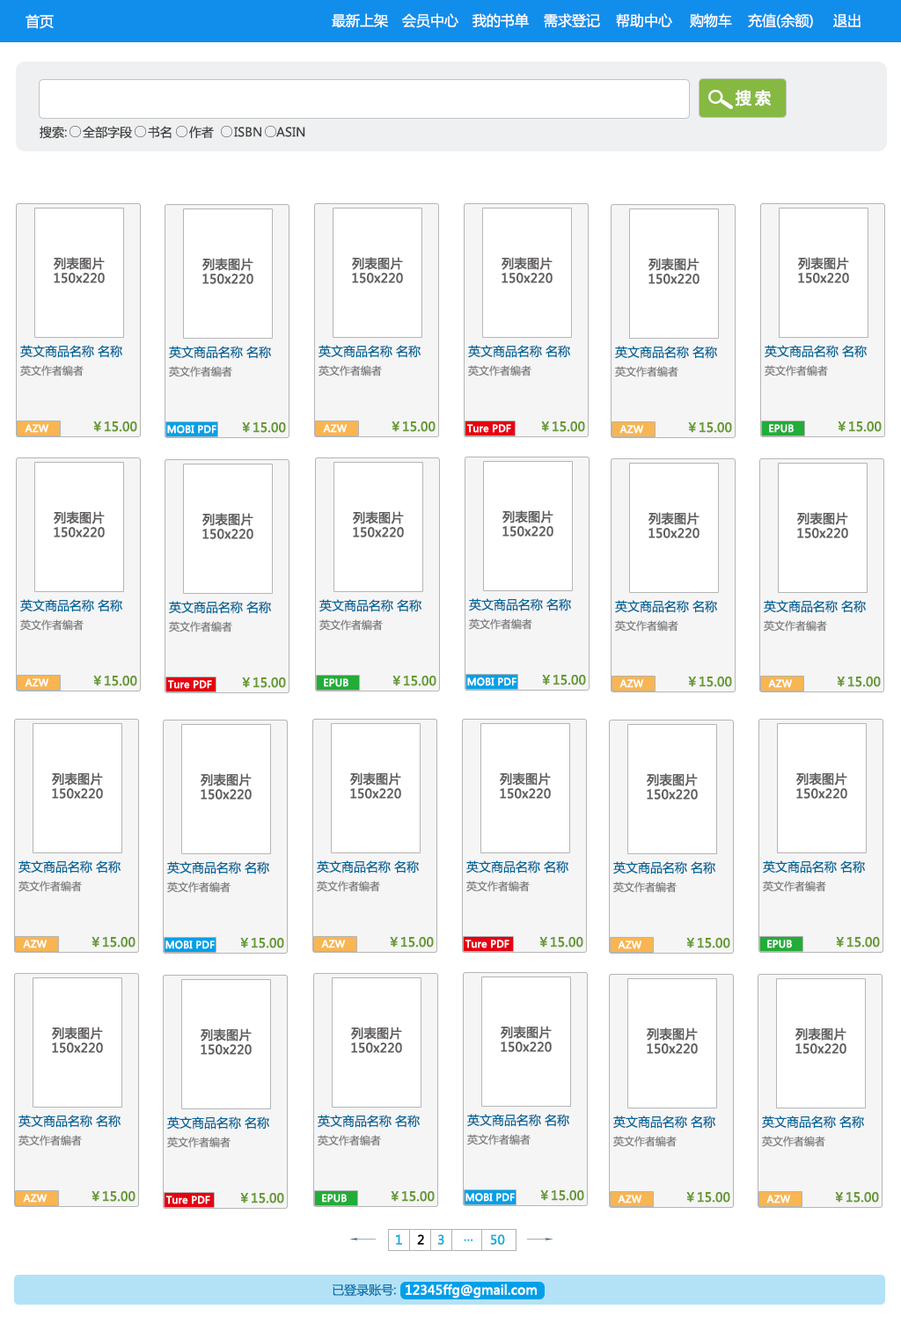
<style>
.page{position:relative;width:901px;height:1324px;background:#ffffff}
.page>*{position:absolute;margin:0}
.t1{font:14.1px "MicrosoftYaHei";color:#ffffff}
.t2{font:15.8px "MicrosoftYaHei";letter-spacing:0.2em;color:#ffffff;font-weight:bold}
.t3{font:12.3px "MicrosoftYaHei";color:#414040}
.t4{font:12.3px "MicrosoftYaHei";color:#615e5e;font-weight:bold}
.t5{font:12.3px "MicrosoftYaHei";color:#006699}
.t6{font:10.6px "MicrosoftYaHei";color:#7e7e7e}
.t7{font:9.7px "MicrosoftYaHei";color:#ffffff;font-weight:bold}
.t8{font:12.3px "MicrosoftYaHei";color:#669933;font-weight:bold}
.t9{font:12.3px "MicrosoftYaHei";color:#19b0dc;font-weight:bold}
.t10{font:12.3px "MicrosoftYaHei";color:#000000;font-weight:bold}
.t11{font:12.3px "MicrosoftYaHei";color:#0875ae}
.t12{font:12.3px "MicrosoftYaHei";color:#ffffff;font-weight:bold}
</style>
<div class="page">
<p class="t1" style="left:26px;top:14px;width:28px;height:15px">首页</p>
<p class="t1" style="left:332px;top:13px;width:56px;height:15px">最新上架</p>
<p class="t1" style="left:402px;top:13px;width:56px;height:15px">会员中心</p>
<p class="t1" style="left:472px;top:13px;width:57px;height:15px">我的书单</p>
<p class="t1" style="left:544px;top:13px;width:56px;height:15px">需求登记</p>
<p class="t1" style="left:616px;top:13px;width:56px;height:15px">帮助中心</p>
<p class="t1" style="left:690px;top:13px;width:42px;height:15px">购物车</p>
<p class="t1" style="left:748px;top:13px;width:65px;height:15px">充值(余额)</p>
<p class="t1" style="left:833px;top:13px;width:27px;height:14px">退出</p>
<p class="t2" style="left:734px;top:90px;width:37px;height:16px">搜索</p>
<p class="t3" style="left:40px;top:126px;width:27px;height:13px">搜索:</p>
<p class="t3" style="left:83px;top:126px;width:49px;height:13px">全部字段</p>
<p class="t3" style="left:148px;top:126px;width:24px;height:13px">书名</p>
<p class="t3" style="left:189px;top:126px;width:25px;height:12px">作者</p>
<p class="t3" style="left:234px;top:127px;width:27px;height:10px">ISBN</p>
<p class="t3" style="left:276px;top:127px;width:29px;height:10px">ASIN</p>
<p class="t4" style="left:54px;top:257px;width:51px;height:26px;text-align:center">列表图片<br>150x220</p>
<p class="t4" style="left:202px;top:258px;width:51px;height:26px;text-align:center">列表图片<br>150x220</p>
<p class="t4" style="left:352px;top:257px;width:51px;height:26px;text-align:center">列表图片<br>150x220</p>
<p class="t4" style="left:501px;top:257px;width:51px;height:26px;text-align:center">列表图片<br>150x220</p>
<p class="t4" style="left:648px;top:258px;width:51px;height:26px;text-align:center">列表图片<br>150x220</p>
<p class="t4" style="left:798px;top:257px;width:51px;height:26px;text-align:center">列表图片<br>150x220</p>
<p class="t5" style="left:20px;top:345px;width:102px;height:13px">英文商品名称 名称</p>
<p class="t5" style="left:169px;top:346px;width:102px;height:13px">英文商品名称 名称</p>
<p class="t5" style="left:318px;top:345px;width:102px;height:13px">英文商品名称 名称</p>
<p class="t5" style="left:468px;top:345px;width:102px;height:13px">英文商品名称 名称</p>
<p class="t5" style="left:615px;top:346px;width:102px;height:13px">英文商品名称 名称</p>
<p class="t5" style="left:764px;top:345px;width:102px;height:13px">英文商品名称 名称</p>
<p class="t6" style="left:20px;top:365px;width:64px;height:11px">英文作者编者</p>
<p class="t6" style="left:169px;top:366px;width:63px;height:11px">英文作者编者</p>
<p class="t6" style="left:318px;top:365px;width:64px;height:11px">英文作者编者</p>
<p class="t6" style="left:468px;top:365px;width:63px;height:11px">英文作者编者</p>
<p class="t6" style="left:615px;top:366px;width:63px;height:11px">英文作者编者</p>
<p class="t6" style="left:764px;top:365px;width:64px;height:11px">英文作者编者</p>
<p class="t7" style="left:25px;top:424px;width:24px;height:9px">AZW</p>
<p class="t8" style="left:93px;top:421px;width:44px;height:11px">￥15.00</p>
<p class="t7" style="left:167px;top:425px;width:49px;height:9px">MOBI PDF</p>
<p class="t8" style="left:242px;top:422px;width:44px;height:11px">￥15.00</p>
<p class="t7" style="left:323px;top:424px;width:24px;height:9px">AZW</p>
<p class="t8" style="left:391px;top:421px;width:44px;height:11px">￥15.00</p>
<p class="t7" style="left:467px;top:424px;width:44px;height:9px">Ture PDF</p>
<p class="t8" style="left:541px;top:421px;width:44px;height:11px">￥15.00</p>
<p class="t7" style="left:619px;top:425px;width:25px;height:9px">AZW</p>
<p class="t8" style="left:688px;top:422px;width:44px;height:11px">￥15.00</p>
<p class="t7" style="left:769px;top:424px;width:24px;height:9px">EPUB</p>
<p class="t8" style="left:837px;top:421px;width:44px;height:11px">￥15.00</p>
<p class="t4" style="left:54px;top:511px;width:51px;height:26px;text-align:center">列表图片<br>150x220</p>
<p class="t4" style="left:202px;top:513px;width:51px;height:26px;text-align:center">列表图片<br>150x220</p>
<p class="t4" style="left:353px;top:511px;width:51px;height:26px;text-align:center">列表图片<br>150x220</p>
<p class="t4" style="left:502px;top:510px;width:51px;height:27px;text-align:center">列表图片<br>150x220</p>
<p class="t4" style="left:648px;top:512px;width:51px;height:26px;text-align:center">列表图片<br>150x220</p>
<p class="t4" style="left:797px;top:512px;width:51px;height:26px;text-align:center">列表图片<br>150x220</p>
<p class="t5" style="left:20px;top:599px;width:102px;height:13px">英文商品名称 名称</p>
<p class="t5" style="left:169px;top:601px;width:102px;height:13px">英文商品名称 名称</p>
<p class="t5" style="left:319px;top:599px;width:102px;height:13px">英文商品名称 名称</p>
<p class="t5" style="left:469px;top:598px;width:102px;height:13px">英文商品名称 名称</p>
<p class="t5" style="left:615px;top:600px;width:102px;height:13px">英文商品名称 名称</p>
<p class="t5" style="left:764px;top:600px;width:102px;height:13px">英文商品名称 名称</p>
<p class="t6" style="left:20px;top:619px;width:64px;height:12px">英文作者编者</p>
<p class="t6" style="left:169px;top:621px;width:63px;height:11px">英文作者编者</p>
<p class="t6" style="left:319px;top:619px;width:64px;height:12px">英文作者编者</p>
<p class="t6" style="left:469px;top:618px;width:63px;height:12px">英文作者编者</p>
<p class="t6" style="left:615px;top:620px;width:63px;height:12px">英文作者编者</p>
<p class="t6" style="left:764px;top:620px;width:63px;height:12px">英文作者编者</p>
<p class="t8" style="left:93px;top:676px;width:44px;height:10px">￥15.00</p>
<p class="t8" style="left:242px;top:677px;width:44px;height:11px">￥15.00</p>
<p class="t8" style="left:392px;top:676px;width:44px;height:10px">￥15.00</p>
<p class="t7" style="left:467px;top:677px;width:49px;height:9px">MOBI PDF</p>
<p class="t8" style="left:542px;top:675px;width:44px;height:10px">￥15.00</p>
<p class="t8" style="left:688px;top:676px;width:44px;height:11px">￥15.00</p>
<p class="t8" style="left:837px;top:676px;width:44px;height:11px">￥15.00</p>
<p class="t7" style="left:25px;top:678px;width:24px;height:9px">AZW</p>
<p class="t7" style="left:168px;top:680px;width:44px;height:9px">Ture PDF</p>
<p class="t7" style="left:324px;top:678px;width:24px;height:9px">EPUB</p>
<p class="t7" style="left:619px;top:679px;width:25px;height:9px">AZW</p>
<p class="t7" style="left:768px;top:679px;width:25px;height:9px">AZW</p>
<p class="t4" style="left:52px;top:772px;width:51px;height:27px;text-align:center">列表图片<br>150x220</p>
<p class="t4" style="left:201px;top:773px;width:51px;height:27px;text-align:center">列表图片<br>150x220</p>
<p class="t4" style="left:350px;top:772px;width:51px;height:27px;text-align:center">列表图片<br>150x220</p>
<p class="t4" style="left:500px;top:772px;width:51px;height:27px;text-align:center">列表图片<br>150x220</p>
<p class="t4" style="left:647px;top:773px;width:51px;height:27px;text-align:center">列表图片<br>150x220</p>
<p class="t4" style="left:796px;top:772px;width:51px;height:27px;text-align:center">列表图片<br>150x220</p>
<p class="t5" style="left:18px;top:860px;width:103px;height:13px">英文商品名称 名称</p>
<p class="t5" style="left:167px;top:861px;width:102px;height:13px">英文商品名称 名称</p>
<p class="t5" style="left:317px;top:860px;width:102px;height:13px">英文商品名称 名称</p>
<p class="t5" style="left:466px;top:860px;width:102px;height:13px">英文商品名称 名称</p>
<p class="t5" style="left:613px;top:861px;width:102px;height:13px">英文商品名称 名称</p>
<p class="t5" style="left:763px;top:860px;width:102px;height:13px">英文商品名称 名称</p>
<p class="t6" style="left:18px;top:881px;width:64px;height:11px">英文作者编者</p>
<p class="t6" style="left:167px;top:881px;width:63px;height:12px">英文作者编者</p>
<p class="t6" style="left:317px;top:881px;width:63px;height:11px">英文作者编者</p>
<p class="t6" style="left:466px;top:881px;width:64px;height:11px">英文作者编者</p>
<p class="t6" style="left:613px;top:881px;width:63px;height:12px">英文作者编者</p>
<p class="t6" style="left:763px;top:881px;width:63px;height:11px">英文作者编者</p>
<p class="t7" style="left:23px;top:939px;width:24px;height:9px">AZW</p>
<p class="t8" style="left:91px;top:937px;width:44px;height:10px">￥15.00</p>
<p class="t7" style="left:165px;top:940px;width:50px;height:9px">MOBI PDF</p>
<p class="t8" style="left:240px;top:938px;width:44px;height:10px">￥15.00</p>
<p class="t7" style="left:321px;top:939px;width:25px;height:9px">AZW</p>
<p class="t8" style="left:390px;top:937px;width:44px;height:10px">￥15.00</p>
<p class="t7" style="left:465px;top:939px;width:44px;height:9px">Ture PDF</p>
<p class="t8" style="left:539px;top:937px;width:44px;height:10px">￥15.00</p>
<p class="t7" style="left:617px;top:940px;width:25px;height:9px">AZW</p>
<p class="t8" style="left:686px;top:938px;width:44px;height:10px">￥15.00</p>
<p class="t7" style="left:767px;top:939px;width:25px;height:9px">EPUB</p>
<p class="t8" style="left:836px;top:937px;width:44px;height:10px">￥15.00</p>
<p class="t4" style="left:501px;top:1026px;width:51px;height:26px;text-align:center">列表图片<br>150x220</p>
<p class="t4" style="left:52px;top:1027px;width:51px;height:26px;text-align:center">列表图片<br>150x220</p>
<p class="t4" style="left:201px;top:1028px;width:51px;height:27px;text-align:center">列表图片<br>150x220</p>
<p class="t4" style="left:351px;top:1027px;width:51px;height:26px;text-align:center">列表图片<br>150x220</p>
<p class="t4" style="left:647px;top:1027px;width:51px;height:27px;text-align:center">列表图片<br>150x220</p>
<p class="t4" style="left:795px;top:1027px;width:51px;height:27px;text-align:center">列表图片<br>150x220</p>
<p class="t5" style="left:18px;top:1114px;width:103px;height:14px">英文商品名称 名称</p>
<p class="t5" style="left:167px;top:1116px;width:102px;height:13px">英文商品名称 名称</p>
<p class="t5" style="left:318px;top:1114px;width:102px;height:14px">英文商品名称 名称</p>
<p class="t5" style="left:467px;top:1114px;width:102px;height:13px">英文商品名称 名称</p>
<p class="t5" style="left:613px;top:1115px;width:102px;height:14px">英文商品名称 名称</p>
<p class="t5" style="left:762px;top:1115px;width:102px;height:14px">英文商品名称 名称</p>
<p class="t6" style="left:467px;top:1134px;width:63px;height:11px">英文作者编者</p>
<p class="t6" style="left:18px;top:1135px;width:64px;height:11px">英文作者编者</p>
<p class="t6" style="left:167px;top:1136px;width:63px;height:12px">英文作者编者</p>
<p class="t6" style="left:318px;top:1135px;width:63px;height:11px">英文作者编者</p>
<p class="t6" style="left:613px;top:1136px;width:63px;height:11px">英文作者编者</p>
<p class="t6" style="left:762px;top:1136px;width:63px;height:11px">英文作者编者</p>
<p class="t7" style="left:23px;top:1194px;width:24px;height:8px">AZW</p>
<p class="t8" style="left:91px;top:1191px;width:44px;height:11px">￥15.00</p>
<p class="t8" style="left:240px;top:1193px;width:44px;height:10px">￥15.00</p>
<p class="t7" style="left:322px;top:1194px;width:25px;height:8px">EPUB</p>
<p class="t8" style="left:391px;top:1191px;width:44px;height:11px">￥15.00</p>
<p class="t7" style="left:465px;top:1193px;width:50px;height:9px">MOBI PDF</p>
<p class="t8" style="left:540px;top:1190px;width:44px;height:11px">￥15.00</p>
<p class="t8" style="left:686px;top:1192px;width:44px;height:10px">￥15.00</p>
<p class="t8" style="left:835px;top:1192px;width:44px;height:10px">￥15.00</p>
<p class="t7" style="left:166px;top:1195px;width:44px;height:9px">Ture PDF</p>
<p class="t7" style="left:617px;top:1195px;width:25px;height:8px">AZW</p>
<p class="t7" style="left:766px;top:1195px;width:25px;height:8px">AZW</p>
<p class="t9" style="left:396px;top:1234px;width:6px;height:11px">1</p>
<p class="t10" style="left:417px;top:1234px;width:7px;height:11px">2</p>
<p class="t9" style="left:437px;top:1234px;width:7px;height:11px">3</p>
<p class="t9" style="left:464px;top:1239px;width:9px;height:2px">...</p>
<p class="t9" style="left:490px;top:1234px;width:15px;height:11px">50</p>
<p class="t11" style="left:332px;top:1283px;width:64px;height:14px">已登录账号:</p>
<p class="t12" style="left:406px;top:1283px;width:131px;height:15px">12345ffg@gmail.com</p>
</div>
